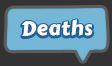
<style>
.page{position:relative;width:112px;height:66px;background:#74b7d7}
.page>*{position:absolute;margin:0}
.t1{font:20px "CarterOne";letter-spacing:0.025em;color:#ffffff}
</style>
<div class="page">
<p class="t1" style="left:22px;top:19px;width:71px;height:17px">Deaths</p>
</div>
